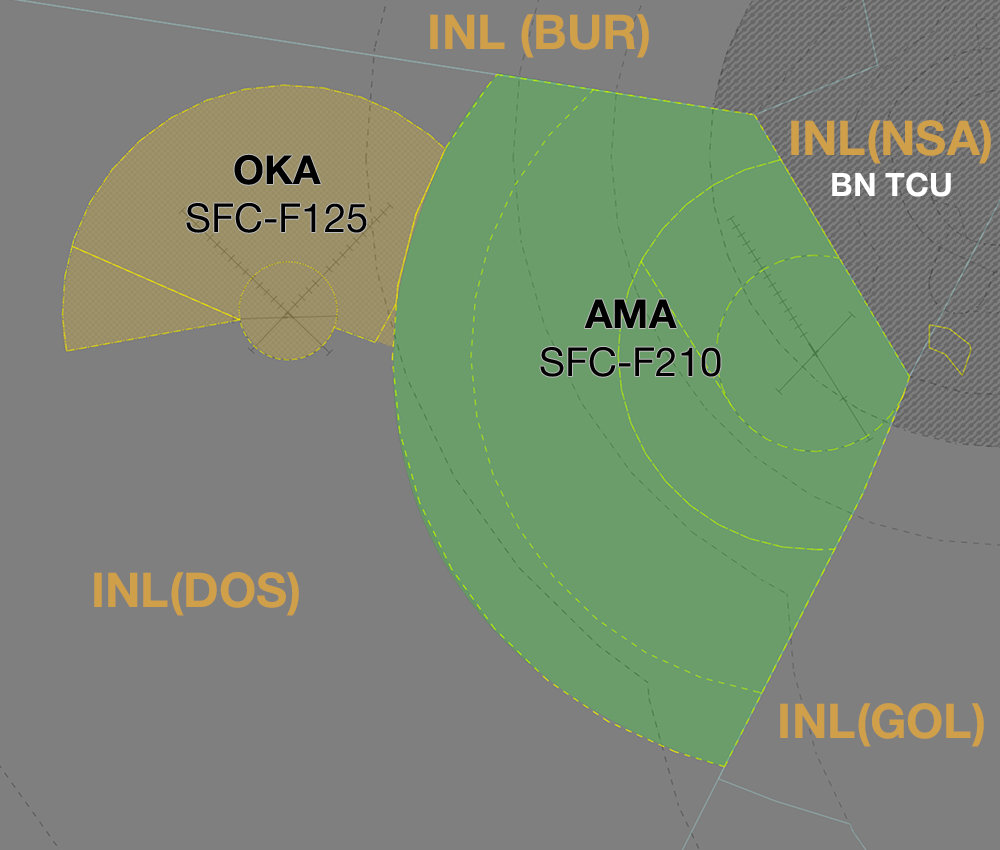
<style>
.page{position:relative;width:1000px;height:850px;background:#7f7f7f}
.page>*{position:absolute;margin:0}
.t1{font:48px "HelveticaNeue-Bold";color:#d09f4a}
.t2{font:40px "HelveticaNeue-Roman";color:#000000}
.t3{font:40px "HelveticaNeue-Bold";color:#000000}
.t4{font:32.2px "HelveticaNeue-Bold";color:#ffffff}
</style>
<div class="page">
<p class="t1" style="left:430px;top:14px;width:219px;height:44px">INL (BUR)</p>
<p class="t1" style="left:791px;top:120px;width:200px;height:44px">INL(NSA)</p>
<p class="t2" style="left:186px;top:154px;width:181px;height:79px;text-align:center"><span class="t3">OKA<br></span>SFC-F125</p>
<p class="t4" style="left:832px;top:172px;width:119px;height:25px">BN TCU</p>
<p class="t2" style="left:540px;top:299px;width:181px;height:78px;text-align:center"><span class="t3">AMA<br></span>SFC-F210</p>
<p class="t1" style="left:94px;top:572px;width:205px;height:44px">INL(DOS)</p>
<p class="t1" style="left:780px;top:703px;width:204px;height:44px">INL(GOL)</p>
</div>
